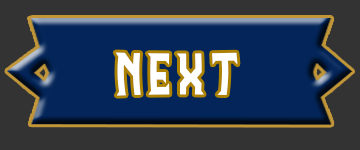
<style>
.page{position:relative;width:360px;height:150px;background:#333333}
.page>*{position:absolute;margin:0}
.t1{font:62.5px "Lorde-Havana";letter-spacing:0.1em;color:#ffffff;scale:0.75 1}
</style>
<div class="page">
<p class="t1" style="left:115px;top:52px;width:123px;height:44px">NEXT</p>
</div>
